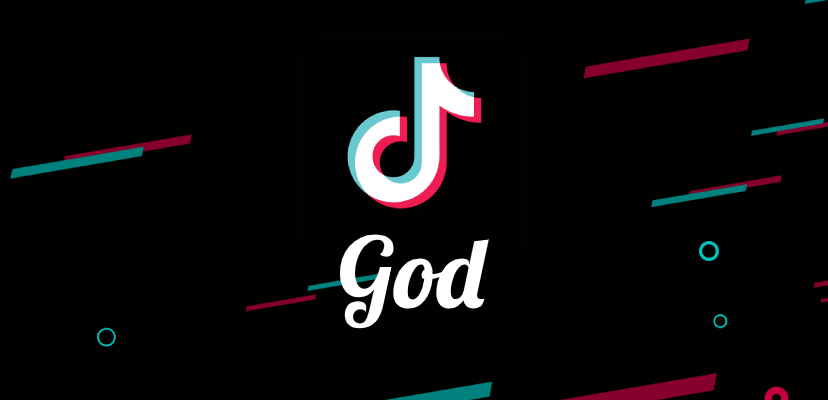
<style>
.page{position:relative;width:828px;height:400px;background:#010101}
.page>*{position:absolute;margin:0}
.t1{font:98px "LobsterTwo-BoldItalic";color:#ffffff}
</style>
<div class="page">
<p class="t1" style="left:339px;top:234px;width:150px;height:95px">God</p>
</div>
